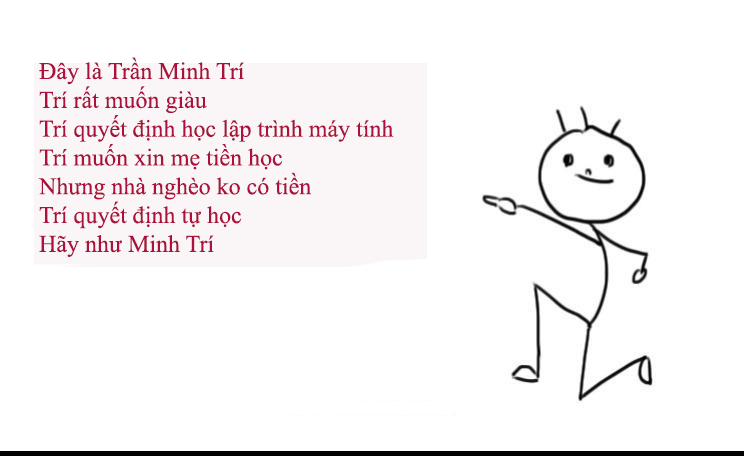
<style>
.page{position:relative;width:744px;height:456px;background:#ffffff}
.page>*{position:absolute;margin:0}
.t1{font:24px "TimesNewRomanPSMT";color:#ab113c}
</style>
<div class="page">
<p class="t1" style="left:38px;top:57px;width:356px;height:200px">Đây là Trần Minh Trí<br>Trí rất muốn giàu <br>Trí quyết định học lập trình máy tính<br>Trí muốn xin mẹ tiền học <br>Nhưng nhà nghèo ko có tiền<br>Trí quyết định tự học<br>Hãy như Minh Trí</p>
</div>
